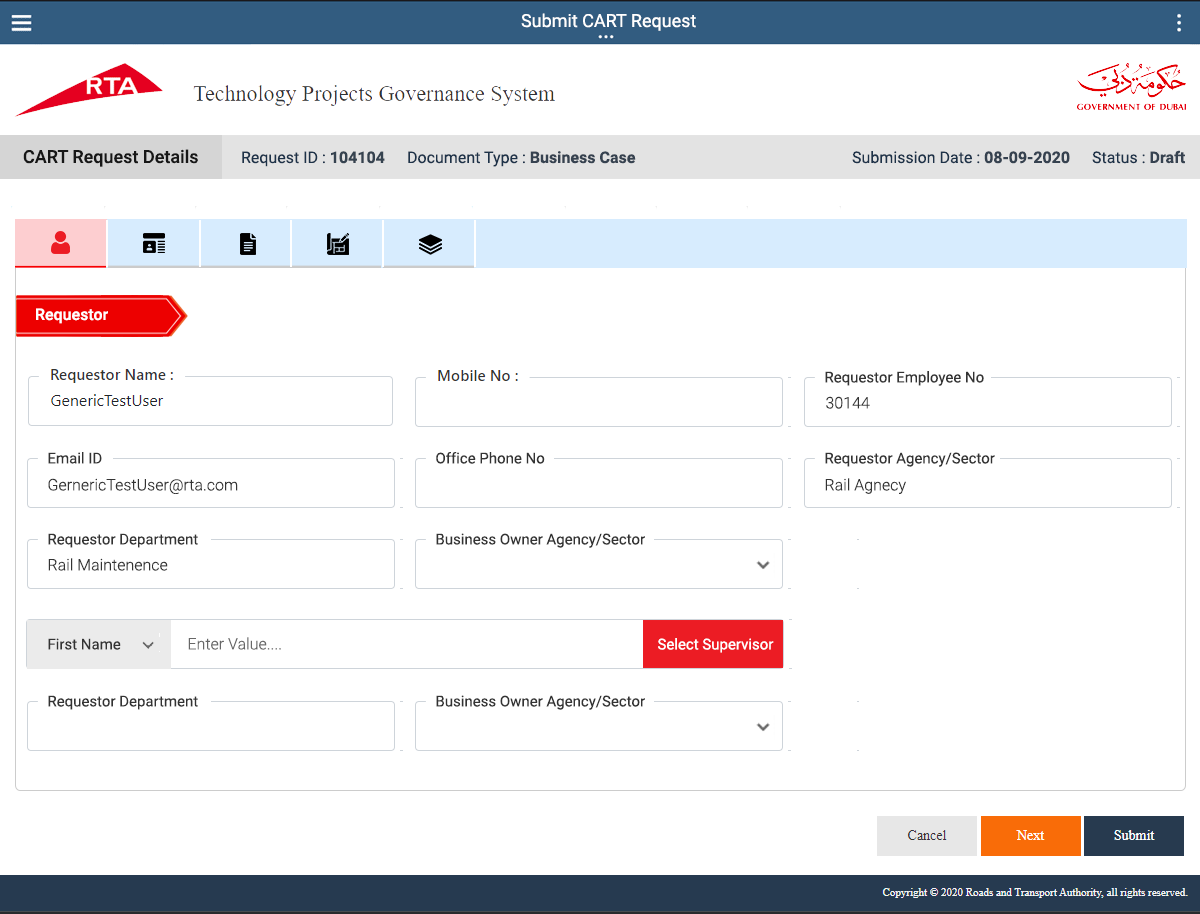
<style>
.page{position:relative;width:1200px;height:914px;background:#ffffff}
.page>*{position:absolute;margin:0}
.t1{font:18px "Roboto-Medium";color:#171717}
.t2{font:16px "Roboto-Regular";color:#1d3249}
.t3{font:16px "Roboto-Bold";color:#364250}
.t4{font:16px "Roboto-Bold";color:#364350}
.t5{font:16px "Roboto-Medium";color:#ffffff}
.t6{font:15px "Roboto-Regular";color:#333333}
.t7{font:16px "Roboto-Light";color:#333333}
.t8{font:16px "Roboto-Light";color:#676767}
.t9{font:15px "Roboto-Regular";color:#ffffff}
</style>
<div class="page">
<p class="t1" style="left:23px;top:149px;width:175px;height:18px">CART Request Details</p>
<p class="t2" style="left:1092px;top:150px;width:93px;height:14px">Status : <span class="t3">Draft</span></p>
<p class="t2" style="left:242px;top:151px;width:143px;height:16px">Request ID : <span class="t4">104104</span></p>
<p class="t2" style="left:408px;top:151px;width:228px;height:16px">Document Type : <span class="t3">Business Case</span></p>
<p class="t2" style="left:852px;top:151px;width:218px;height:13px">Submission Date : <span class="t3">08-09-2020</span></p>
<p class="t5" style="left:36px;top:308px;width:72px;height:16px">Requestor</p>
<p class="t6" style="left:825px;top:371px;width:159px;height:15px">Requestor Employee No</p>
<p class="t7" style="left:826px;top:396px;width:44px;height:13px">30144</p>
<p class="t6" style="left:48px;top:452px;width:54px;height:12px">Email ID</p>
<p class="t6" style="left:436px;top:452px;width:109px;height:12px">Office Phone No</p>
<p class="t6" style="left:825px;top:452px;width:170px;height:15px">Requestor Agency/Sector</p>
<p class="t7" style="left:48px;top:478px;width:190px;height:16px">GernericTestUser@rta.com</p>
<p class="t7" style="left:825px;top:478px;width:81px;height:16px">Rail Agnecy</p>
<p class="t6" style="left:48px;top:533px;width:150px;height:15px">Requestor Department</p>
<p class="t6" style="left:436px;top:533px;width:209px;height:15px">Business Owner Agency/Sector</p>
<p class="t7" style="left:48px;top:558px;width:120px;height:13px">Rail Maintenence</p>
<p class="t6" style="left:48px;top:638px;width:73px;height:12px">First Name</p>
<p class="t8" style="left:188px;top:637px;width:93px;height:13px">Enter Value....</p>
<p class="t9" style="left:658px;top:638px;width:116px;height:15px">Select Supervisor</p>
<p class="t6" style="left:48px;top:695px;width:150px;height:15px">Requestor Department</p>
<p class="t6" style="left:436px;top:695px;width:209px;height:15px">Business Owner Agency/Sector</p>
</div>
